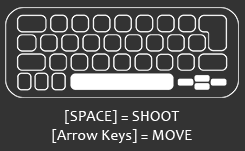
<style>
.page{position:relative;width:245px;height:151px;background:#333333}
.page>*{position:absolute;margin:0}
.t1{font:15.4px "Candara";color:#ffffff}
</style>
<div class="page">
<p class="t1" style="left:52px;top:110px;width:140px;height:33px;text-align:center">[SPACE] = SHOOT<br>[Arrow Keys] = MOVE</p>
</div>
